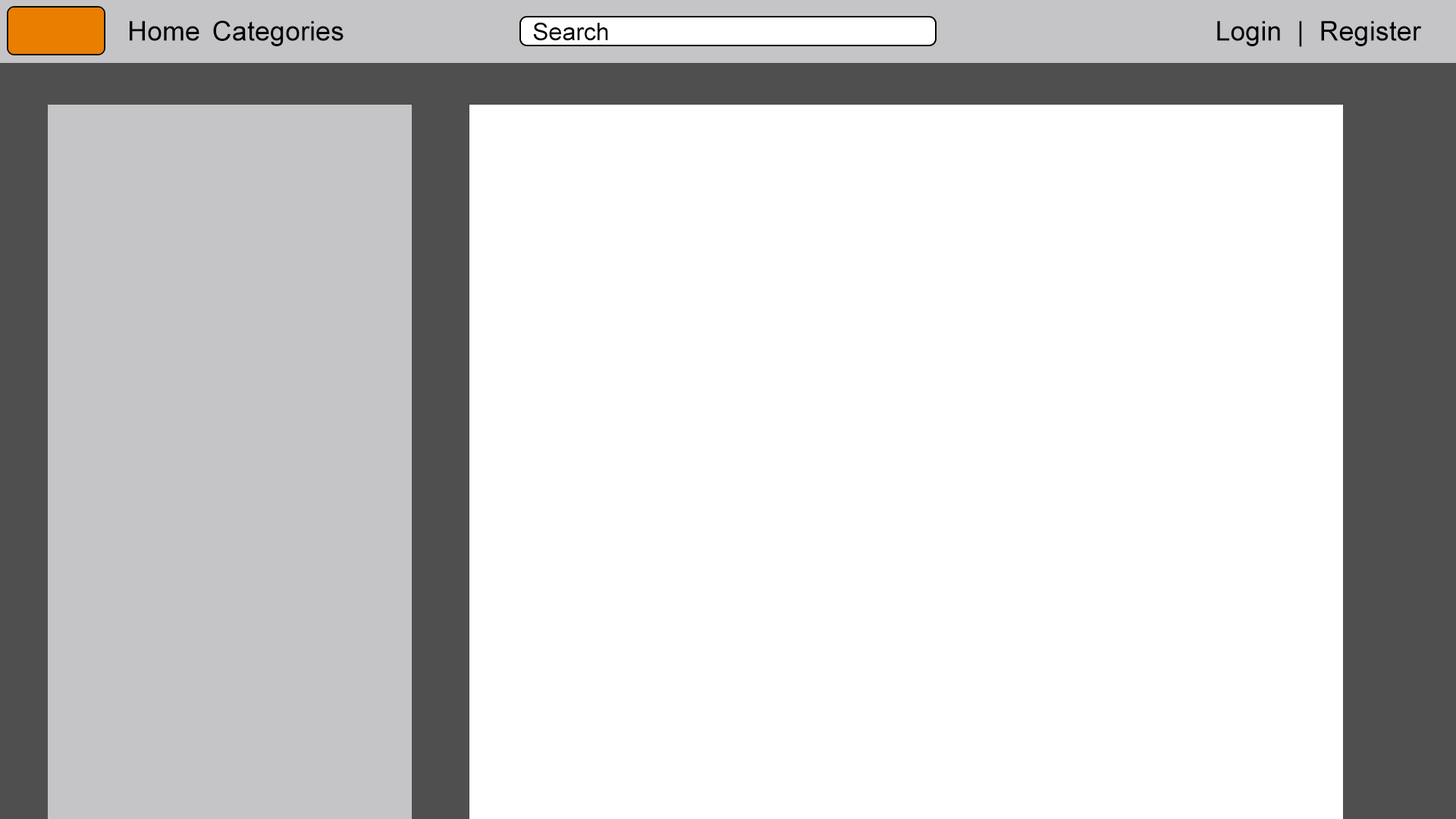
<style>
.page{position:relative;width:1456px;height:819px;background:#ffffff}
.page>*{position:absolute;margin:0}
.t1{font:27.3px "ArialMT";color:#000000}
.t2{font:24.3px "ArialMT";color:#000000}
</style>
<div class="page">
<p class="t1" style="left:130px;top:20px;width:69px;height:21px">Home</p>
<p class="t1" style="left:213px;top:20px;width:131px;height:26px">Categories</p>
<p class="t2" style="left:533px;top:22px;width:75px;height:19px">Search</p>
<p class="t1" style="left:1217px;top:20px;width:205px;height:27px">Login  |  Register</p>
</div>
